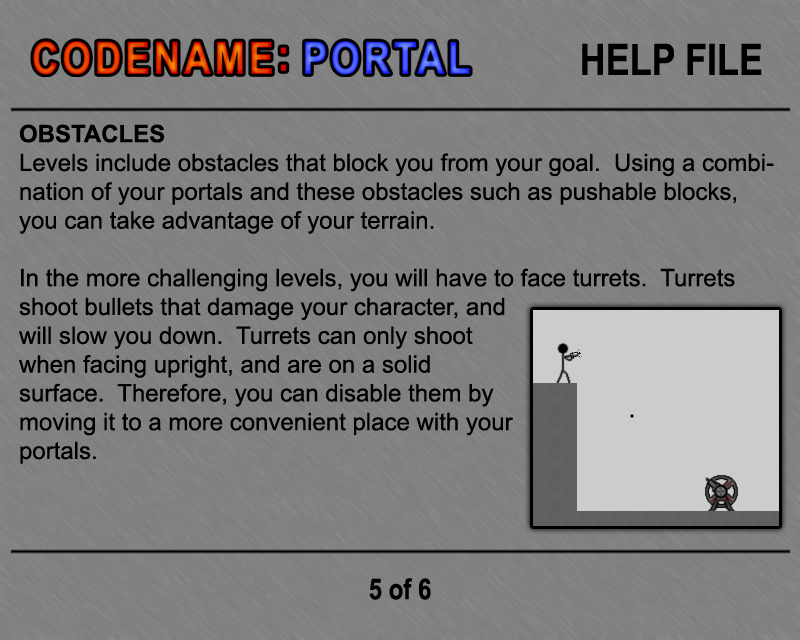
<style>
.page{position:relative;width:800px;height:640px;background:#808080}
.page>*{position:absolute;margin:0}
.t1{font:43.2px "Arial-BoldMT";color:#000000;scale:0.83 1}
.t2{font:24px "ArialMT";color:#000000}
.t3{font:24px "Arial-BoldMT";color:#000000}
.t4{font:28.8px "Arial-BoldMT";color:#000000;scale:0.83 1}
</style>
<div class="page">
<p class="t1" style="left:582px;top:43px;width:180px;height:32px">HELP FILE</p>
<p class="t2" style="left:19px;top:124px;width:755px;height:340px"><span class="t3">OBSTACLES<br></span>Levels include obstacles that block you from your goal.  Using a combination of your portals and these obstacles such as pushable blocks, you can take advantage of your terrain.<br><br>In the more challenging levels, you will have to face turrets.  Turrets shoot bullets that damage your character, and <br>will slow you down.  Turrets can only shoot <br>when facing upright, and are on a solid <br>surface.  Therefore, you can disable them by <br>moving it to a more convenient place with your <br>portals.</p>
<p class="t4" style="left:369px;top:578px;width:62px;height:22px">5 of 6</p>
</div>
